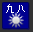
<style>
.page{position:relative;width:33px;height:32px;background:#000090}
.page>*{position:absolute;margin:0}
.t1{font:10.4px "SimSun";color:#ffffff}
</style>
<div class="page">
<p class="t1" style="left:6px;top:4px;width:19px;height:9px">九八</p>
</div>
